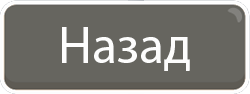
<style>
.page{position:relative;width:250px;height:94px;background:#66655f}
.page>*{position:absolute;margin:0}
.t1{font:52px "MyriadPro-Regular";color:#fdfdfd}
</style>
<div class="page">
<p class="t1" style="left:62px;top:27px;width:128px;height:44px">Назад</p>
</div>
